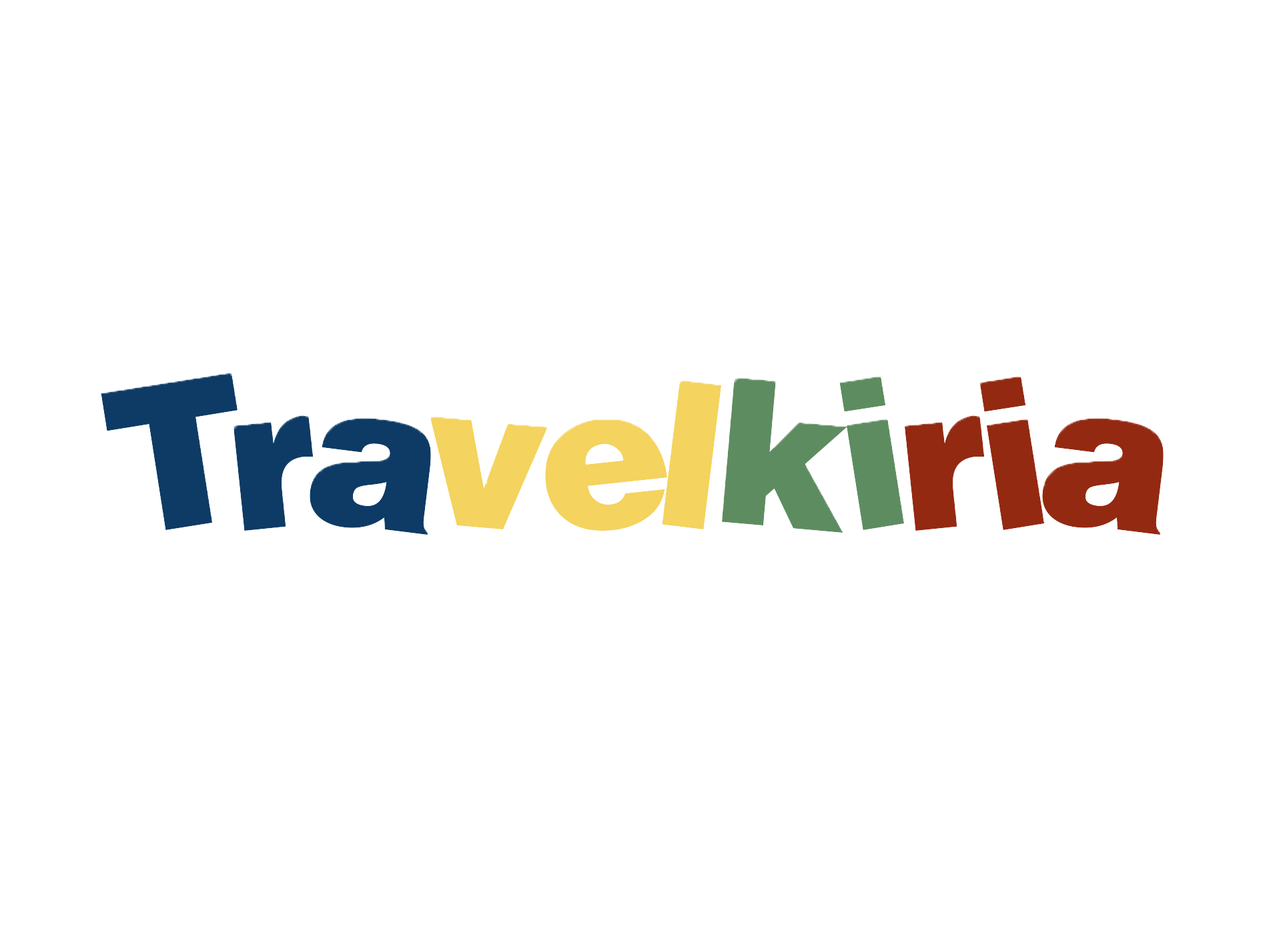
<style>
.page{position:relative;width:1261px;height:946px;background:#ffffff}
.page>*{position:absolute;margin:0}
.t1{font:200.2px "Soopafresh";color:#0d3b66}
.t2{font:200.2px "Soopafresh";color:#f4d35e}
.t3{font:200.2px "Soopafresh";color:#5e8c61}
.t4{font:200.2px "Soopafresh";color:#942911}
</style>
<div class="page">
<p class="t1" style="left:101px;top:372px;width:1063px;height:162px">Tra<span class="t2">vel</span><span class="t3">ki</span><span class="t4">ria</span></p>
</div>
